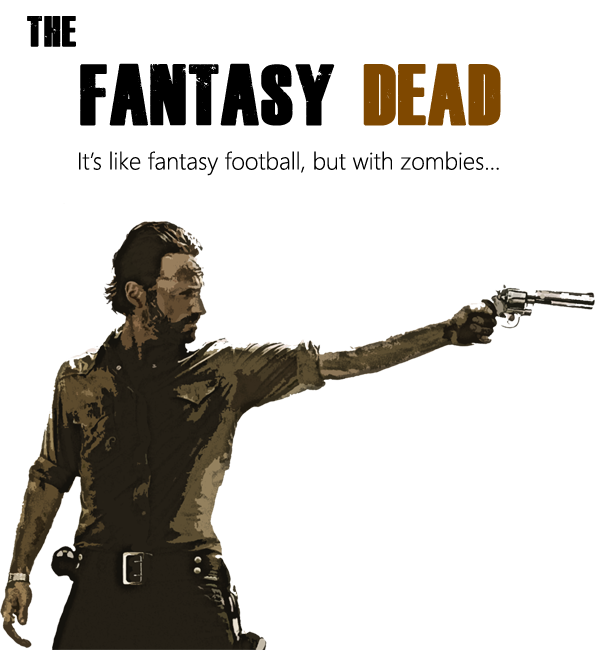
<style>
.page{position:relative;width:607px;height:650px;background:#ffffff}
.page>*{position:absolute;margin:0}
.t1{font:30px "DeadKansas";color:#000000}
.t2{font:60px "DeadKansas";color:#000000}
.t3{font:60px "DeadKansas";color:#7f4800}
.t4{font:24px "SegoeUI-Light";color:#000000}
</style>
<div class="page">
<p class="t1" style="left:27px;top:16px;width:49px;height:31px">The</p>
<p class="t2" style="left:80px;top:63px;width:421px;height:63px">FANTASY <span class="t3">DEAD</span></p>
<p class="t4" style="left:79px;top:151px;width:420px;height:25px">It’s like fantasy football, but with zombies...</p>
</div>
